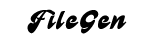
<style>
.page{position:relative;width:152px;height:40px;background:#ffffff}
.page>*{position:absolute;margin:0}
.t1{font:25px "Recollect";letter-spacing:0.1em;color:#000000}
</style>
<div class="page">
<p class="t1" style="left:27px;top:9px;width:100px;height:25px">FileGen</p>
</div>
